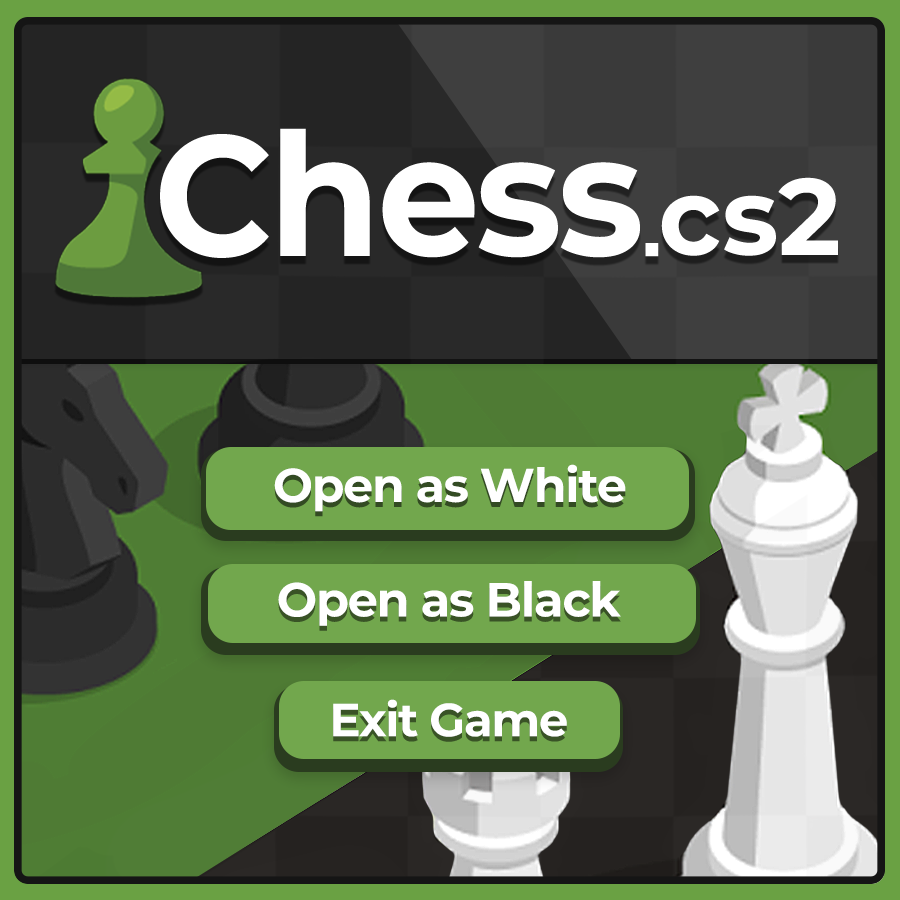
<style>
.page{position:relative;width:900px;height:900px}
.page>*{position:absolute;margin:0}
.t1{font:171px "MontserratRoman-Bold";letter-spacing:-0.025em;color:#ffffff;scale:0.95 1}
.t2{font:107.9px "MontserratRoman-Bold";letter-spacing:0.01em;color:#ffffff}
.t3{font:96.8px "Arial-BoldMT";letter-spacing:0.01em;color:#ffffff;scale:0.97 1}
.t4{font:47.3px "MontserratRoman-Bold";letter-spacing:-0.025em;color:#ffffff}
.t5{font:47.8px "MontserratRoman-Bold";letter-spacing:-0.025em;color:#ffffff}
.t6{font:46.5px "MontserratRoman-Bold";letter-spacing:-0.025em;color:#ffffff}
</style>
<div class="page">
<p class="t1" style="left:160px;top:128px;width:480px;height:130px">Chess</p>
<p class="t2" style="left:661px;top:177px;width:177px;height:79px">cs2</p>
<p class="t3" style="left:645px;top:243px;width:14px;height:14px">.</p>
<p class="t4" style="left:274px;top:464px;width:352px;height:48px">Open as White</p>
<p class="t5" style="left:278px;top:581px;width:343px;height:45px">Open as Black</p>
<p class="t6" style="left:333px;top:699px;width:234px;height:38px">Exit Game</p>
</div>
